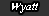
<style>
.page{position:relative;width:49px;height:16px;background:#333333}
.page>*{position:absolute;margin:0}
.t1{font:14px "Vijaya-Bold";color:#ffffff}
</style>
<div class="page">
<p class="t1" style="left:12px;top:3px;width:26px;height:10px">Wyatt</p>
</div>
